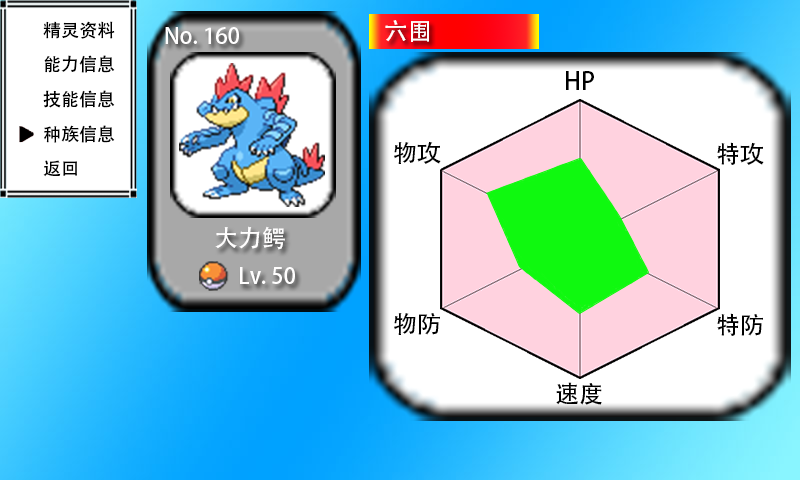
<style>
.page{position:relative;width:800px;height:480px;background:#ffffff}
.page>*{position:absolute;margin:0}
.t1{font:18px "AdobeHeitiStd-Regular";color:#000000}
.t2{font:22px "AdobeHeitiStd-Regular";color:#fffefe}
.t3{font:24px "AdobeHeitiStd-Regular";color:#fffefe}
.t4{font:24px "AdobeHeitiStd-Regular";color:#000000}
</style>
<div class="page">
<p class="t1" style="left:43px;top:21px;width:72px;height:18px">精灵资料</p>
<p class="t2" style="left:165px;top:27px;width:74px;height:17px">No. 160</p>
<p class="t3" style="left:385px;top:20px;width:44px;height:22px">六围</p>
<p class="t1" style="left:44px;top:55px;width:71px;height:18px">能力信息</p>
<p class="t4" style="left:566px;top:71px;width:28px;height:19px">HP</p>
<p class="t1" style="left:43px;top:90px;width:72px;height:18px">技能信息</p>
<p class="t1" style="left:44px;top:125px;width:71px;height:18px">种族信息</p>
<p class="t4" style="left:394px;top:141px;width:47px;height:23px">物攻</p>
<p class="t4" style="left:717px;top:142px;width:47px;height:23px">特攻</p>
<p class="t1" style="left:43px;top:160px;width:34px;height:17px">返回</p>
<p class="t3" style="left:215px;top:226px;width:70px;height:24px">大力鳄</p>
<p class="t2" style="left:240px;top:267px;width:55px;height:17px">Lv. 50</p>
<p class="t4" style="left:394px;top:313px;width:46px;height:22px">物防</p>
<p class="t4" style="left:717px;top:313px;width:46px;height:23px">特防</p>
<p class="t4" style="left:556px;top:382px;width:46px;height:23px">速度</p>
</div>
